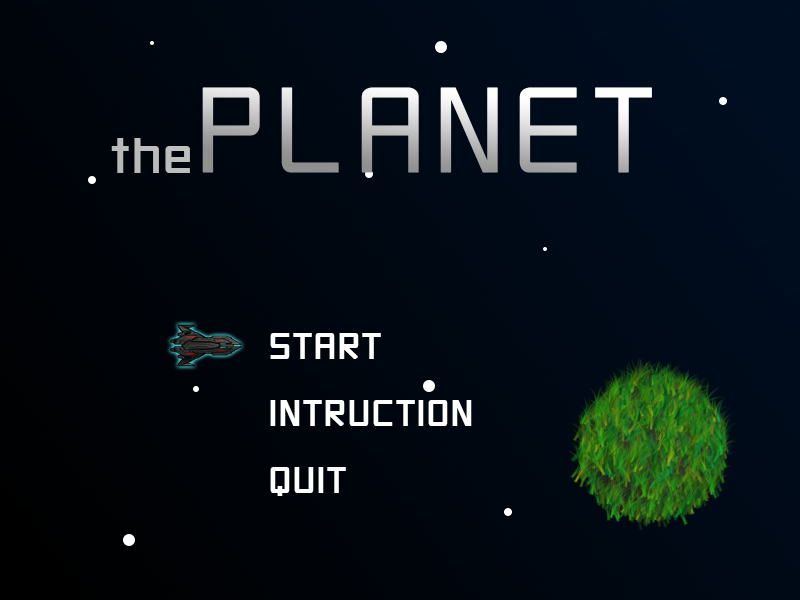
<style>
.page{position:relative;width:800px;height:600px}
.page>*{position:absolute;margin:0}
.t1{font:186.4px "2006iannnnnISO";font-weight:bold}
.t2{font:75.2px "2006iannnnnISO";color:#bcbcbc;font-weight:bold}
.t3{font:56.1px "2006iannnnnISO";color:#ffffff;font-weight:bold}
</style>
<div class="page">
<p class="t1" style="left:202px;top:87px;width:450px;height:86px">PLANET</p>
<p class="t2" style="left:111px;top:138px;width:79px;height:35px">the</p>
<p class="t3" style="left:270px;top:333px;width:202px;height:163px">START<br>INTRUCTION<br>QUIT</p>
</div>
